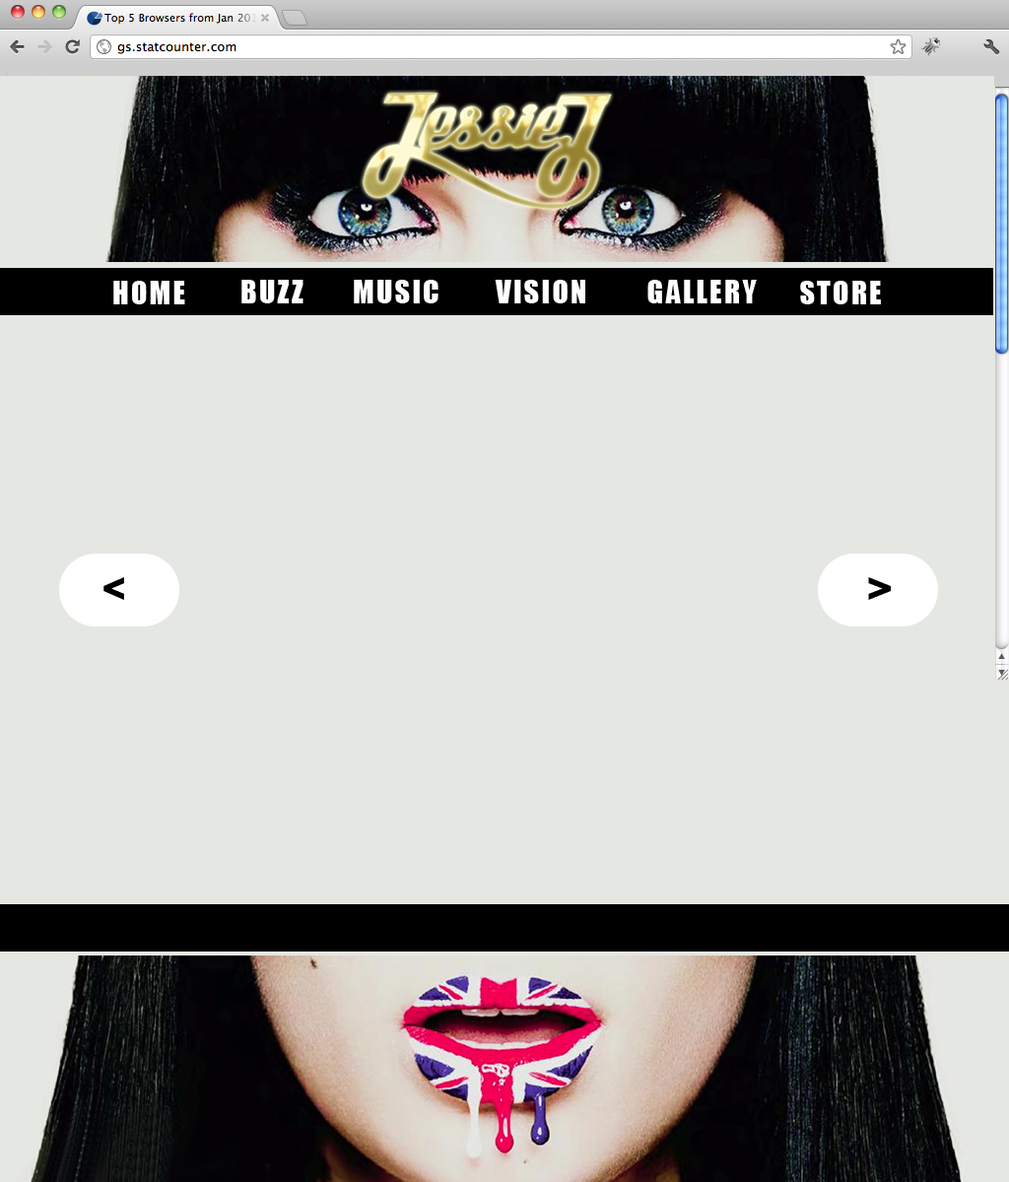
<style>
.page{position:relative;width:1009px;height:1182px;background:#e5e7e2}
.page>*{position:absolute;margin:0}
.t1{font:29.6px "Impact";letter-spacing:0.075em;color:#ffffff}
.t2{font:47.3px "Impact";letter-spacing:0.075em;color:#000000;scale:0.92 1}
.t3{font:47.3px "Impact";letter-spacing:0.075em;color:#000000}
</style>
<div class="page">
<p class="t1" style="left:113px;top:281px;width:72px;height:23px">HOME</p>
<p class="t1" style="left:241px;top:280px;width:62px;height:23px">BUZZ</p>
<p class="t1" style="left:354px;top:280px;width:84px;height:23px">MUSIC</p>
<p class="t1" style="left:495px;top:280px;width:90px;height:23px">VISION</p>
<p class="t1" style="left:647px;top:280px;width:110px;height:23px">GALLERY</p>
<p class="t1" style="left:800px;top:281px;width:81px;height:23px">STORE</p>
<p class="t2" style="left:103px;top:577px;width:21px;height:23px;rotate:180deg">&gt;</p>
<p class="t3" style="left:868px;top:577px;width:23px;height:23px">&gt;</p>
</div>
